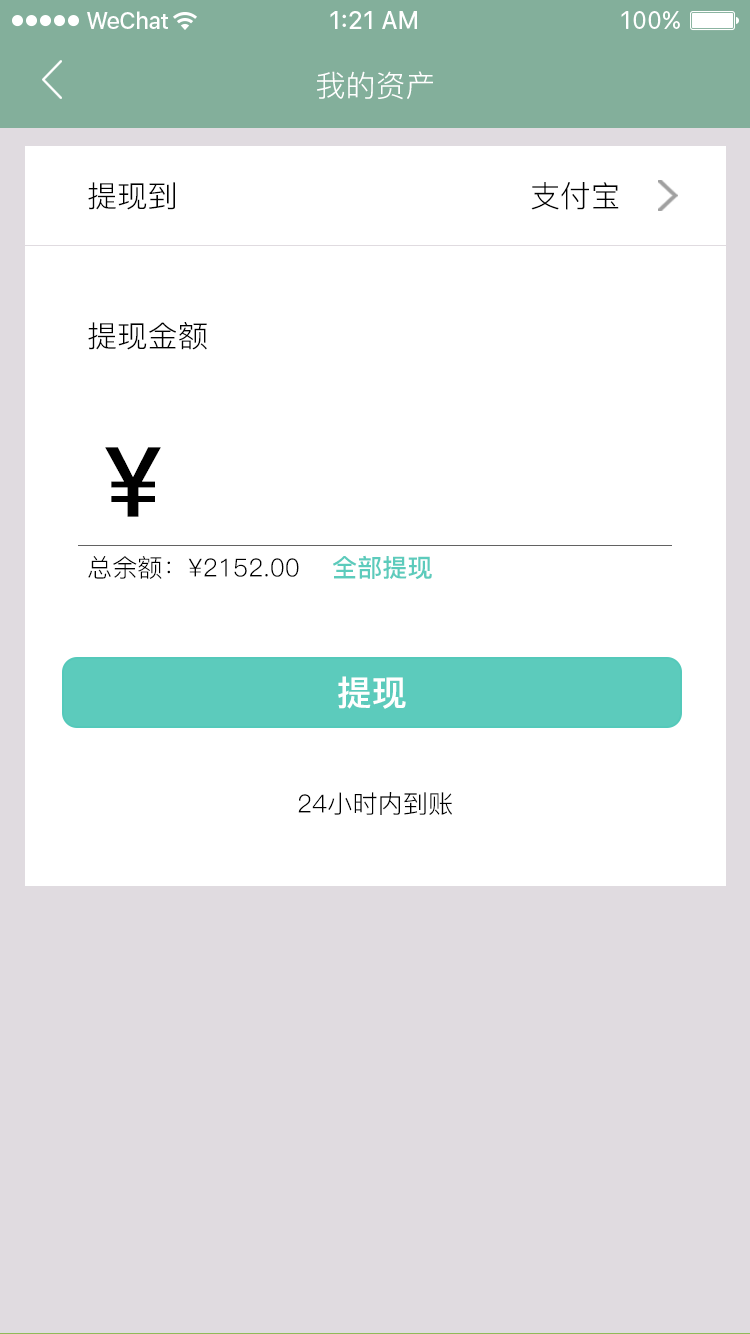
<style>
.page{position:relative;width:750px;height:1334px;background:#ffffff}
.page>*{position:absolute;margin:0}
.t1{font:30px "PingFang-SC-Regular";color:#ffffff;text-transform:uppercase}
.t2{font:30px "PingFang-SC-Regular";color:#000000;text-transform:uppercase}
.t3{font:97.4px "PingFang-SC-Bold";color:#000000;text-transform:uppercase}
.t4{font:25px "PingFang-SC-Regular";color:#000000;text-transform:uppercase}
.t5{font:25px "PingFang-SC-Bold";color:#5ccbbc;text-transform:uppercase}
.t6{font:35px "PingFang-SC-Bold";color:#ffffff;text-transform:uppercase}
</style>
<div class="page">
<p class="t1" style="left:317px;top:71px;width:116px;height:29px">我的资产</p>
<p class="t2" style="left:88px;top:182px;width:87px;height:28px">提现到</p>
<p class="t2" style="left:531px;top:182px;width:88px;height:28px">支付宝</p>
<p class="t2" style="left:88px;top:322px;width:119px;height:28px">提现金额</p>
<p class="t3" style="left:105px;top:447px;width:56px;height:70px">¥</p>
<p class="t4" style="left:88px;top:556px;width:211px;height:23px">总余额：¥2152.00</p>
<p class="t5" style="left:333px;top:555px;width:99px;height:25px">全部提现</p>
<p class="t6" style="left:338px;top:676px;width:68px;height:33px">提现</p>
<p class="t4" style="left:298px;top:792px;width:154px;height:23px">24小时内到账</p>
</div>
